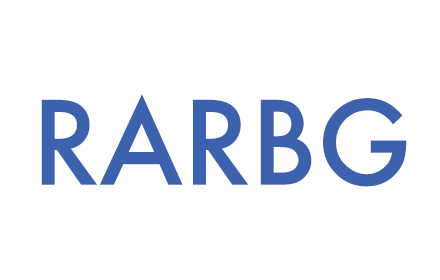
<style>
.page{position:relative;width:440px;height:280px;background:#ffffff}
.page>*{position:absolute;margin:0}
.t1{font:112.5px "Futura-Medium";color:#3d62ad}
</style>
<div class="page">
<p class="t1" style="left:41px;top:94px;width:366px;height:93px">RARBG</p>
</div>
